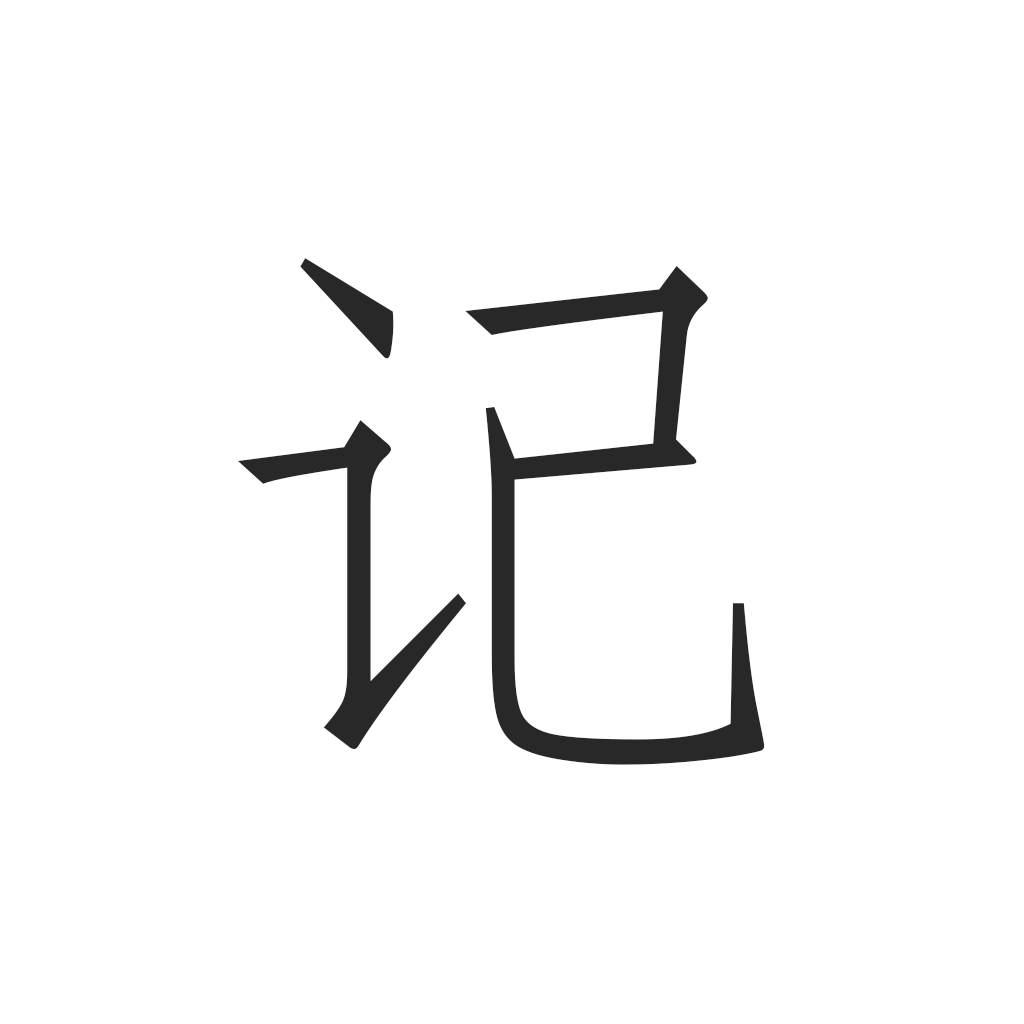
<style>
.page{position:relative;width:1024px;height:1024px;background:#ffffff}
.page>*{position:absolute;margin:0}
.t1{font:600px "STFangsong";color:#282828}
</style>
<div class="page">
<p class="t1" style="left:238px;top:258px;width:527px;height:507px">记</p>
</div>
